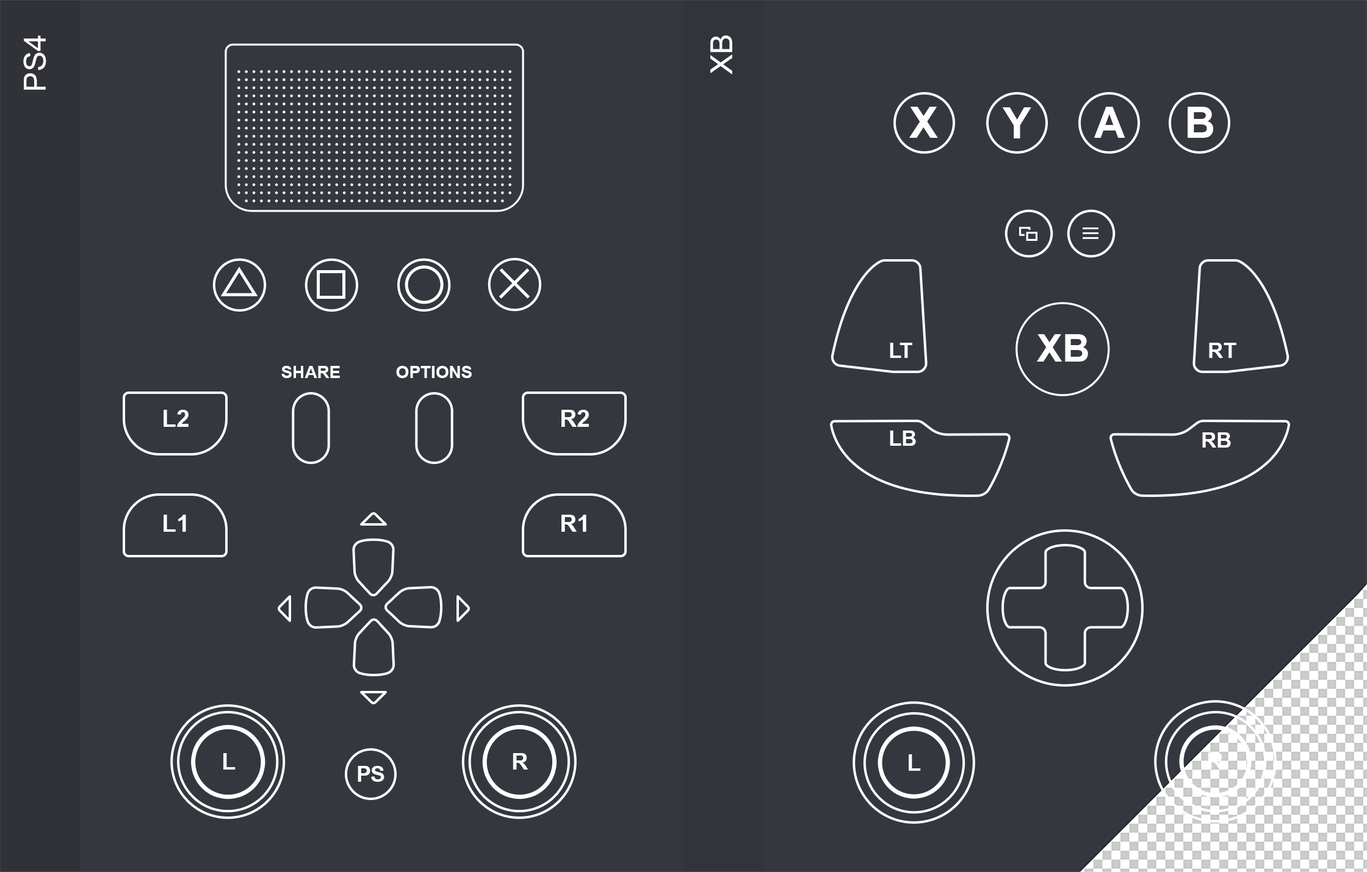
<style>
.page{position:relative;width:1367px;height:872px;background:#35373e}
.page>*{position:absolute;margin:0}
.t1{font:30.5px "ArialMT";color:#ffffff}
.t2{font:43.6px "Arial-BoldMT";color:#ffffff}
.t3{font:38px "Arial-BoldMT";color:#ffffff}
.t4{font:21.4px "Arial-BoldMT";color:#ffffff}
.t5{font:17.1px "Arial-BoldMT";color:#ffffff}
.t6{font:23.6px "Arial-BoldMT";color:#ffffff}
.t7{font:23.2px "Arial-BoldMT";color:#ffffff}
.t8{font:21.9px "Arial-BoldMT";letter-spacing:-0.04em;color:#ffffff}
</style>
<div class="page">
<p class="t1" style="left:23px;top:35px;width:23px;height:55px;rotate:-90deg">PS4</p>
<p class="t1" style="left:710px;top:35px;width:22px;height:39px;rotate:-90deg">XB</p>
<p class="t2" style="left:909px;top:107px;width:29px;height:31px">X</p>
<p class="t2" style="left:1002px;top:107px;width:29px;height:32px">Y</p>
<p class="t2" style="left:1094px;top:107px;width:31px;height:31px">A</p>
<p class="t2" style="left:1187px;top:107px;width:26px;height:31px">B</p>
<p class="t3" style="left:1037px;top:334px;width:51px;height:28px">XB</p>
<p class="t4" style="left:890px;top:343px;width:22px;height:15px">LT</p>
<p class="t4" style="left:1209px;top:343px;width:27px;height:15px">RT</p>
<p class="t5" style="left:281px;top:366px;width:59px;height:12px">SHARE</p>
<p class="t5" style="left:396px;top:366px;width:76px;height:12px">OPTIONS</p>
<p class="t6" style="left:164px;top:410px;width:25px;height:17px">L2</p>
<p class="t6" style="left:561px;top:410px;width:28px;height:17px">R2</p>
<p class="t4" style="left:890px;top:431px;width:26px;height:15px">LB</p>
<p class="t4" style="left:1202px;top:433px;width:29px;height:15px">RB</p>
<p class="t6" style="left:164px;top:515px;width:22px;height:17px">L1</p>
<p class="t6" style="left:561px;top:515px;width:25px;height:17px">R1</p>
<p class="t7" style="left:223px;top:754px;width:13px;height:16px">L</p>
<p class="t7" style="left:513px;top:754px;width:15px;height:16px">R</p>
<p class="t7" style="left:908px;top:755px;width:13px;height:16px">L</p>
<p class="t7" style="left:1207px;top:753px;width:16px;height:16px">R</p>
<p class="t8" style="left:358px;top:766px;width:26px;height:16px">PS</p>
</div>
